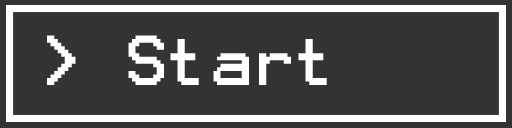
<style>
.page{position:relative;width:512px;height:128px;background:#333333}
.page>*{position:absolute;margin:0}
.t1{font:56.5px "Terminal";color:#ffffff}
</style>
<div class="page">
<p class="t1" style="left:47px;top:35px;width:280px;height:50px">&gt; Start</p>
</div>
